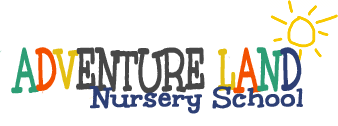
<style>
.page{position:relative;width:338px;height:126px;background:#ffffff}
.page>*{position:absolute;margin:0}
.t1{font:59.6px "Unkempt-Bold";color:#474747;font-weight:bold;scale:0.58 1}
.t2{font:59.6px "Unkempt-Bold";color:#2d9e75;font-weight:bold;scale:0.58 1}
.t3{font:59.6px "Unkempt-Bold";color:#f35000;font-weight:bold;scale:0.58 1}
.t4{font:59.6px "Unkempt-Bold";color:#e3bf13;font-weight:bold;scale:0.58 1}
.t5{font:59.6px "Unkempt-Bold";color:#2d3f75;font-weight:bold;scale:0.58 1}
.t6{font:30px "Unkempt-Bold";color:#2d3f75;font-weight:bold}
</style>
<div class="page">
<p class="t1" style="left:11px;top:47px;width:291px;height:47px"><span class="t2">A</span><span class="t3">D</span><span class="t4">V</span>ENTURE <span class="t4">L</span><span class="t3">A</span><span class="t2">N</span><span class="t5">D</span></p>
<p class="t6" style="left:89px;top:86px;width:214px;height:28px">Nursery School</p>
</div>
